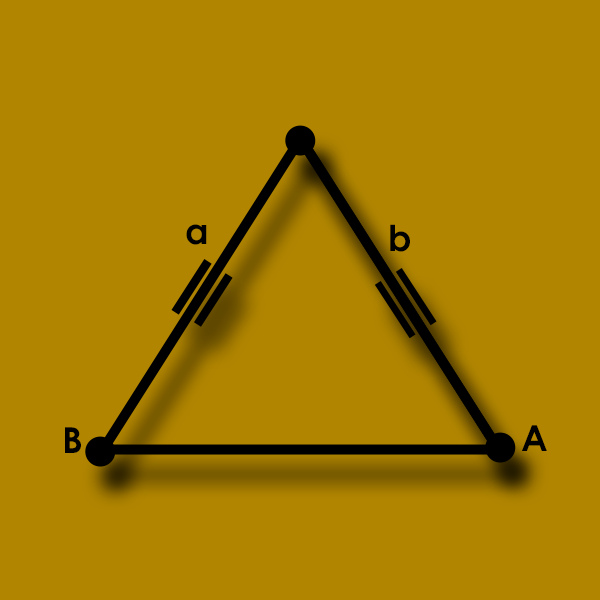
<style>
.page{position:relative;width:600px;height:600px;background:#b18500}
.page>*{position:absolute;margin:0}
.t1{font:35.9px "CenturyGothic-Bold";color:#000000}
</style>
<div class="page">
<p class="t1" style="left:186px;top:224px;width:21px;height:21px">a</p>
<p class="t1" style="left:390px;top:224px;width:20px;height:28px">b</p>
<p class="t1" style="left:522px;top:425px;width:25px;height:26px">A</p>
<p class="t1" style="left:65px;top:427px;width:16px;height:26px">B</p>
</div>
